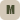
<style>
.page{position:relative;width:20px;height:20px;background:#d4c9b9}
.page>*{position:absolute;margin:0}
.t1{font:12px "Impact";color:#494e31}
</style>
<div class="page">
<p class="t1" style="left:6px;top:5px;width:9px;height:9px">M</p>
</div>
